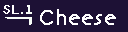
<style>
.page{position:relative;width:128px;height:32px;background:#1d1135}
.page>*{position:absolute;margin:0}
.t1{font:12px "BonvenoCF-Light";letter-spacing:0.005em;color:#ffffff;font-weight:bold}
.t2{font:18px "BonvenoCF-Light";letter-spacing:0.005em;color:#ffffff;font-weight:bold}
</style>
<div class="page">
<p class="t1" style="left:3px;top:5px;width:16px;height:9px">SL</p>
<p class="t2" style="left:40px;top:9px;width:76px;height:16px">Cheese</p>
</div>
